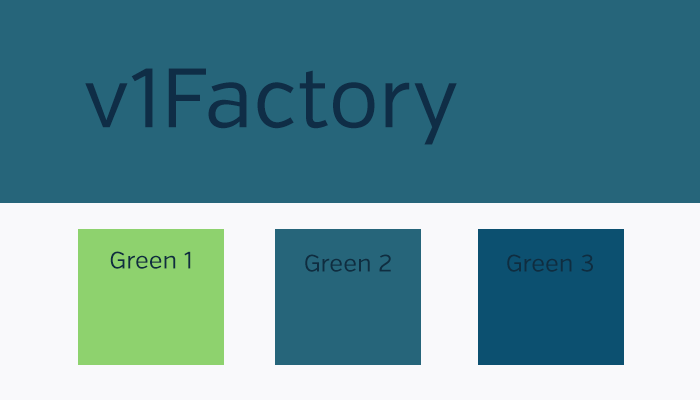
<style>
.page{position:relative;width:700px;height:400px;background:#26657a}
.page>*{position:absolute;margin:0}
.t1{font:84px "VerbRegular";color:#0f2d46}
.t2{font:24px "VerbRegular";color:#0f2d40}
</style>
<div class="page">
<p class="t1" style="left:85px;top:68px;width:372px;height:77px">v1Factory</p>
<p class="t2" style="left:110px;top:251px;width:81px;height:18px">Green 1</p>
<p class="t2" style="left:305px;top:254px;width:86px;height:18px">Green 2</p>
<p class="t2" style="left:507px;top:254px;width:86px;height:18px">Green 3</p>
</div>
